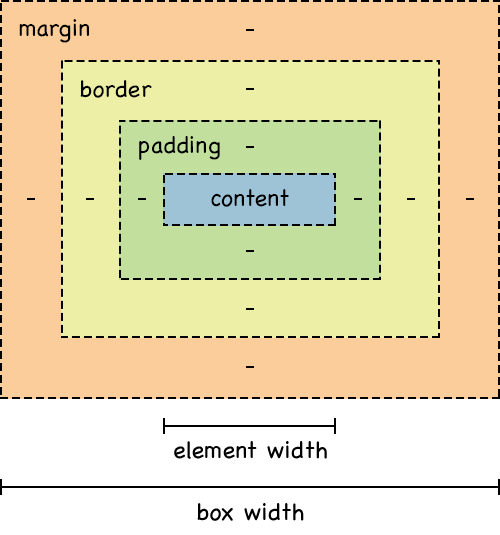
<style>
.page{position:relative;width:500px;height:535px;background:#facd9a}
.page>*{position:absolute;margin:0}
.t1{font:24px "Chalkboard";color:#000000}
</style>
<div class="page">
<p class="t1" style="left:19px;top:19px;width:70px;height:24px">margin</p>
<p class="t1" style="left:80px;top:80px;width:72px;height:18px">border</p>
<p class="t1" style="left:139px;top:136px;width:81px;height:24px">padding</p>
<p class="t1" style="left:211px;top:189px;width:78px;height:18px">content</p>
<p class="t1" style="left:174px;top:441px;width:153px;height:18px">element width</p>
<p class="t1" style="left:197px;top:503px;width:107px;height:18px">box width</p>
</div>
